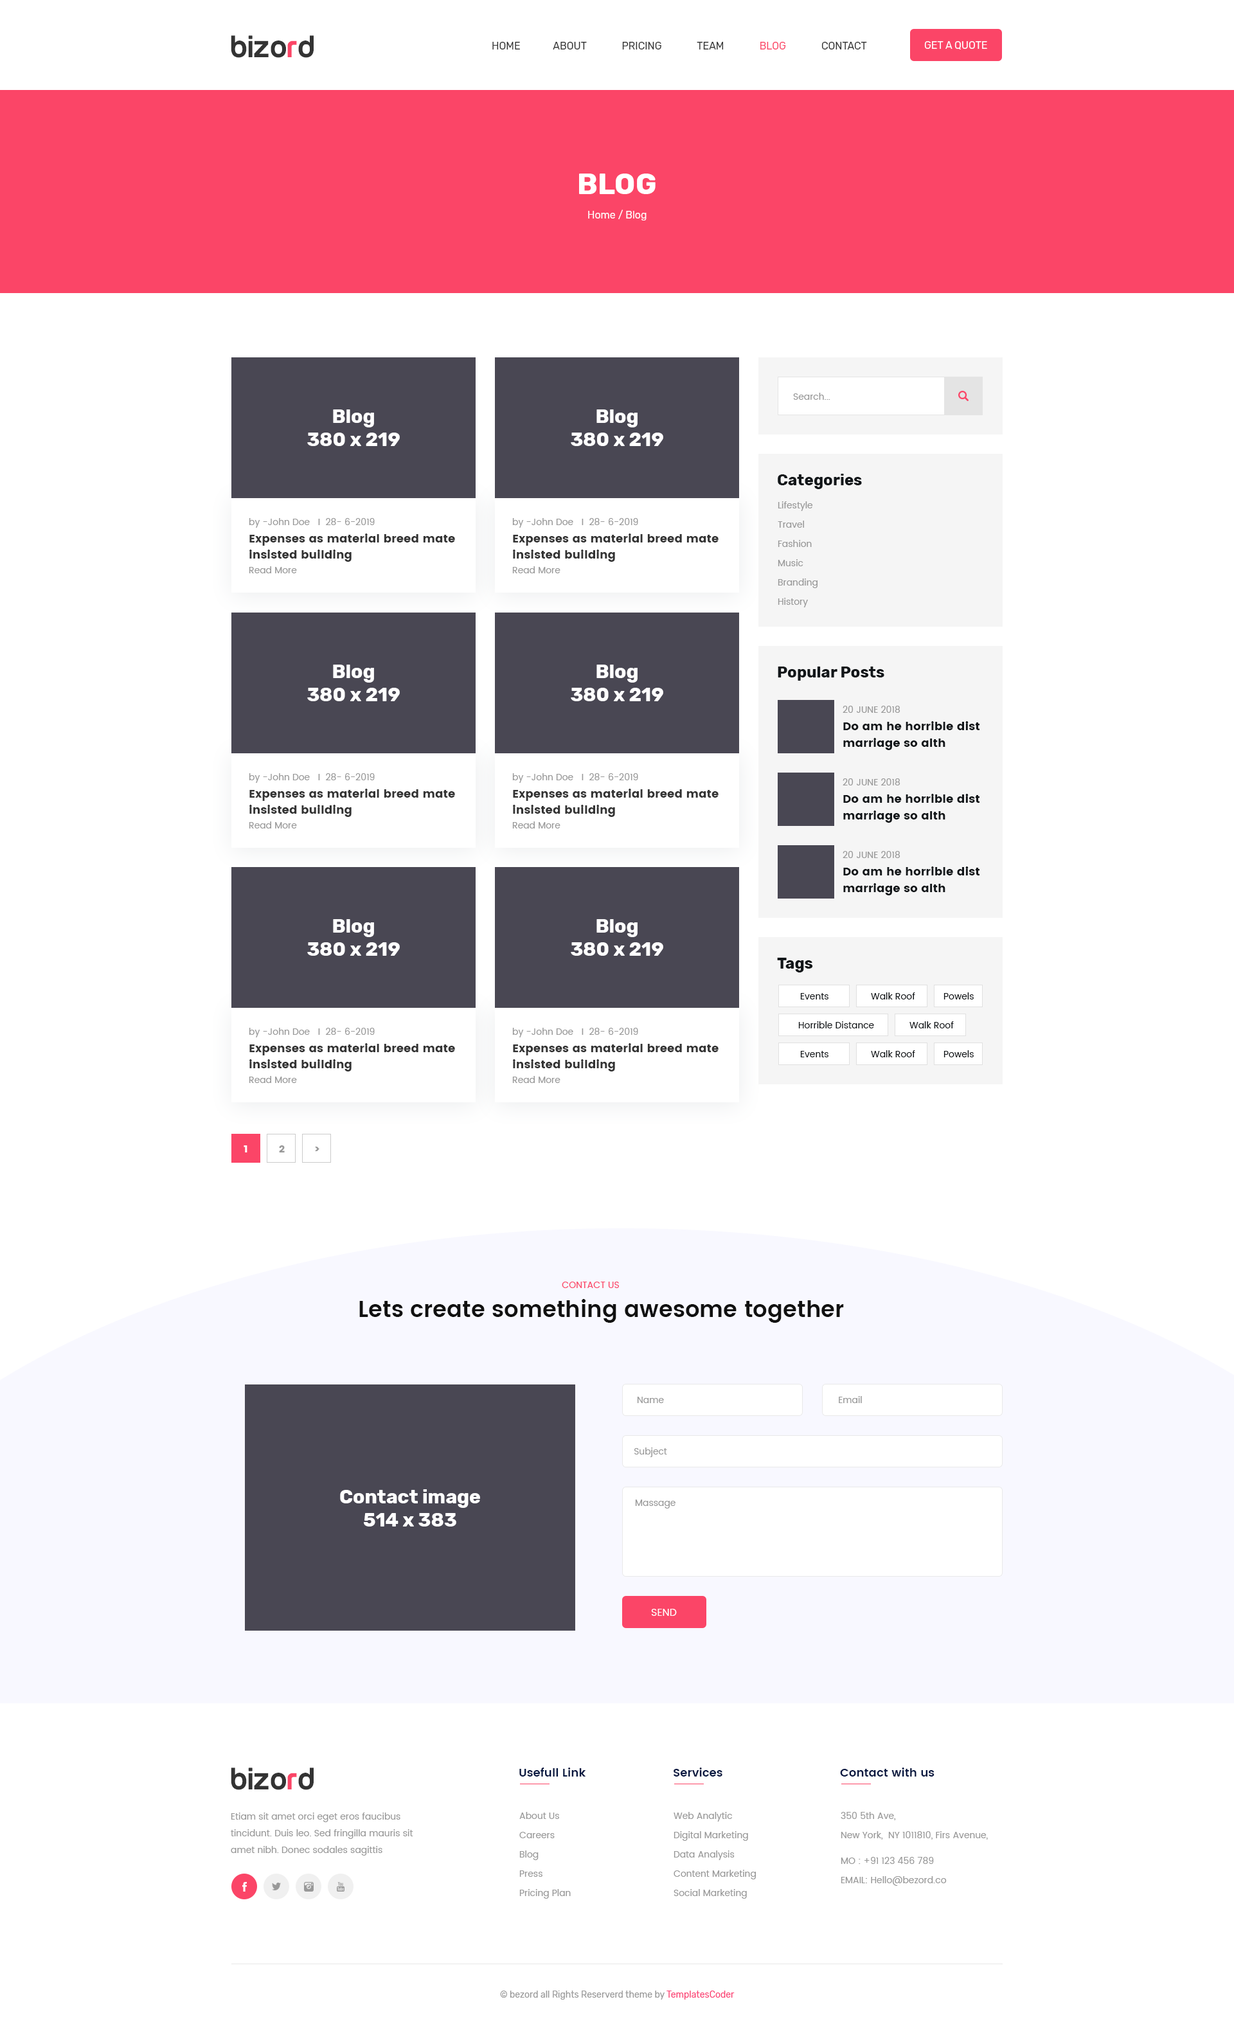
<style>
.page{position:relative;width:1234px;height:2024px;background:#ffffff}
.page>*{position:absolute;margin:0}
.t1{font:32.1px "Run-Medium";color:#333333;text-transform:uppercase}
.t2{font:32.1px "Run-Medium";color:#fb4567;text-transform:uppercase}
.t3{font:10.3px "Rubik-Regular";color:#333333;text-transform:uppercase}
.t4{font:10.3px "Rubik-Regular";color:#fb4567;text-transform:uppercase}
.t5{font:10.3px "Rubik-Regular";color:#ffffff;text-transform:uppercase}
.t6{font:28.9px "Rubik-Bold";color:#ffffff;text-transform:uppercase}
.t7{font:10.3px "Rubik-Regular";color:#ffffff}
.t8{font:9px "Poppins-Regular";color:#999999}
.t9{font:19.3px "Rubik-Bold";color:#ffffff}
.t10{font:15.4px "Rubik-Bold";color:#121619}
.t11{font:9px/19.3px "Poppins-Regular";color:#999999}
.t12{font:11.6px/16.1px "Poppins";color:#333333}
.t13{font:11.6px/16.7px "Poppins";color:#121619}
.t14{font:9px "Poppins-Regular";color:#121619}
.t15{font:10.3px "Poppins";color:#ffffff}
.t16{font:10.3px "Poppins";color:#999999}
.t17{font:9px "Poppins-Regular";color:#fb4567;text-transform:uppercase}
.t18{font:22.5px "Poppins-SemiBold";color:#111111}
.t19{font:10.3px "Poppins-Regular";color:#ffffff;text-transform:uppercase}
.t20{font:11.6px "Poppins-SemiBold";color:#081841}
.t21{font:9px/16.7px "Poppins-Regular";color:#999999}
.t22{font:9px "Rubik-Regular";color:#999999}
.t23{font:9px "Rubik-Regular";color:#fb4275}
</style>
<div class="page">
<p class="t1" style="left:231px;top:35px;width:83px;height:23px">bizo<span class="t2">r</span>d</p>
<p class="t3" style="left:492px;top:42px;width:375px;height:8px">home             About              Pricing              Team              <span class="t4">Blog </span>             contact</p>
<p class="t5" style="left:924px;top:41px;width:63px;height:9px">Get a Quote</p>
<p class="t6" style="left:579px;top:174px;width:77px;height:20px">blog</p>
<p class="t7" style="left:588px;top:210px;width:59px;height:11px">Home / Blog</p>
<p class="t8" style="left:793px;top:393px;width:38px;height:7px">Search...</p>
<p class="t9" style="left:307px;top:410px;width:93px;height:36px;text-align:center">Blog<br>380 x 219</p>
<p class="t9" style="left:571px;top:410px;width:92px;height:36px;text-align:center">Blog<br>380 x 219</p>
<p class="t10" style="left:778px;top:474px;width:84px;height:15px">Categories</p>
<p class="t11" style="left:778px;top:501px;width:40px;height:107px">Lifestyle<br>Travel<br>Fashion<br>Music<br>Branding<br>History</p>
<p class="t8" style="left:249px;top:518px;width:126px;height:10px">by -John Doe   I  28- 6-2019</p>
<p class="t8" style="left:512px;top:518px;width:126px;height:10px">by -John Doe   I  28- 6-2019</p>
<p class="t12" style="left:249px;top:534px;width:206px;height:28px">Expenses as material breed mate<br>insisted building</p>
<p class="t12" style="left:513px;top:534px;width:206px;height:28px">Expenses as material breed mate<br>insisted building</p>
<p class="t8" style="left:249px;top:566px;width:48px;height:7px">Read More</p>
<p class="t8" style="left:512px;top:566px;width:49px;height:7px">Read More</p>
<p class="t9" style="left:307px;top:665px;width:93px;height:36px;text-align:center">Blog<br>380 x 219</p>
<p class="t9" style="left:571px;top:665px;width:92px;height:36px;text-align:center">Blog<br>380 x 219</p>
<p class="t10" style="left:778px;top:667px;width:107px;height:14px">Popular Posts</p>
<p class="t8" style="left:843px;top:706px;width:58px;height:7px">20 JUNE 2018</p>
<p class="t13" style="left:843px;top:721px;width:137px;height:29px">Do am he horrible dist<br>marriage so alth</p>
<p class="t8" style="left:249px;top:773px;width:126px;height:10px">by -John Doe   I  28- 6-2019</p>
<p class="t8" style="left:512px;top:773px;width:126px;height:10px">by -John Doe   I  28- 6-2019</p>
<p class="t8" style="left:843px;top:779px;width:58px;height:7px">20 JUNE 2018</p>
<p class="t12" style="left:249px;top:789px;width:206px;height:28px">Expenses as material breed mate<br>insisted building</p>
<p class="t12" style="left:513px;top:789px;width:206px;height:28px">Expenses as material breed mate<br>insisted building</p>
<p class="t13" style="left:843px;top:794px;width:137px;height:29px">Do am he horrible dist<br>marriage so alth</p>
<p class="t8" style="left:249px;top:822px;width:48px;height:7px">Read More</p>
<p class="t8" style="left:512px;top:822px;width:49px;height:7px">Read More</p>
<p class="t8" style="left:843px;top:851px;width:58px;height:7px">20 JUNE 2018</p>
<p class="t13" style="left:843px;top:867px;width:137px;height:29px">Do am he horrible dist<br>marriage so alth</p>
<p class="t9" style="left:307px;top:919px;width:93px;height:37px;text-align:center">Blog<br>380 x 219</p>
<p class="t9" style="left:571px;top:919px;width:92px;height:37px;text-align:center">Blog<br>380 x 219</p>
<p class="t10" style="left:777px;top:958px;width:36px;height:15px">Tags</p>
<p class="t14" style="left:800px;top:993px;width:29px;height:7px">Events</p>
<p class="t14" style="left:871px;top:993px;width:44px;height:7px">Walk Roof</p>
<p class="t14" style="left:944px;top:993px;width:30px;height:7px">Powels</p>
<p class="t14" style="left:798px;top:1022px;width:76px;height:7px">Horrible Distance</p>
<p class="t14" style="left:910px;top:1022px;width:44px;height:7px">Walk Roof</p>
<p class="t8" style="left:249px;top:1028px;width:126px;height:10px">by -John Doe   I  28- 6-2019</p>
<p class="t8" style="left:512px;top:1028px;width:126px;height:10px">by -John Doe   I  28- 6-2019</p>
<p class="t12" style="left:249px;top:1043px;width:206px;height:29px">Expenses as material breed mate<br>insisted building</p>
<p class="t12" style="left:513px;top:1043px;width:206px;height:29px">Expenses as material breed mate<br>insisted building</p>
<p class="t14" style="left:800px;top:1051px;width:29px;height:7px">Events</p>
<p class="t14" style="left:871px;top:1050px;width:44px;height:8px">Walk Roof</p>
<p class="t14" style="left:944px;top:1050px;width:30px;height:8px">Powels</p>
<p class="t8" style="left:249px;top:1076px;width:48px;height:7px">Read More</p>
<p class="t8" style="left:512px;top:1076px;width:49px;height:7px">Read More</p>
<p class="t15" style="left:244px;top:1146px;width:4px;height:7px">1</p>
<p class="t16" style="left:279px;top:1146px;width:6px;height:7px">2</p>
<p class="t16" style="left:315px;top:1147px;width:5px;height:4px">&gt;</p>
<p class="t17" style="left:562px;top:1282px;width:57px;height:6px">contact us</p>
<p class="t18" style="left:359px;top:1299px;width:485px;height:24px">Lets create something awesome together</p>
<p class="t8" style="left:637px;top:1397px;width:27px;height:6px">Name</p>
<p class="t8" style="left:839px;top:1396px;width:23px;height:7px">Email</p>
<p class="t8" style="left:634px;top:1448px;width:33px;height:9px">Subject</p>
<p class="t9" style="left:340px;top:1490px;width:140px;height:37px;text-align:center">Contact image<br>514 x 383</p>
<p class="t8" style="left:635px;top:1500px;width:41px;height:9px">Massage</p>
<p class="t19" style="left:651px;top:1609px;width:26px;height:7px">Send</p>
<p class="t1" style="left:231px;top:1768px;width:83px;height:22px">bizo<span class="t2">r</span>d</p>
<p class="t20" style="left:519px;top:1768px;width:67px;height:9px">Usefull Link</p>
<p class="t20" style="left:674px;top:1768px;width:49px;height:9px">Services</p>
<p class="t20" style="left:840px;top:1768px;width:95px;height:9px">Contact with us</p>
<p class="t21" style="left:231px;top:1813px;width:182px;height:43px">Etiam sit amet orci eget eros faucibus tincidunt. Duis leo. Sed fringilla mauris sit amet nibh. Donec sodales sagittis</p>
<p class="t11" style="left:519px;top:1812px;width:52px;height:87px">About Us<br>Careers<br>Blog<br>Press<br>Pricing Plan</p>
<p class="t11" style="left:674px;top:1812px;width:82px;height:87px">Web Analytic<br>Digital Marketing<br>Data Analysis<br>Content Marketing<br>Social Marketing</p>
<p class="t11" style="left:841px;top:1812px;width:147px;height:28px">350 5th Ave,<br>New York,  NY 1011810, Firs Avenue,</p>
<p class="t8" style="left:841px;top:1857px;width:93px;height:7px">MO : +91 123 456 789</p>
<p class="t8" style="left:841px;top:1877px;width:106px;height:9px">EMAIL: Hello@bezord.co</p>
<p class="t22" style="left:500px;top:1991px;width:235px;height:9px">© bezord all Rights Reserverd theme by <span class="t23">TemplatesCoder</span></p>
</div>
